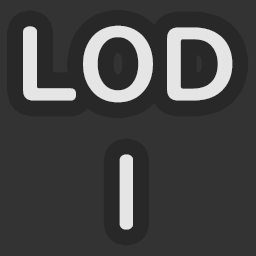
<style>
.page{position:relative;width:256px;height:256px;background:#333333}
.page>*{position:absolute;margin:0}
.t1{font:100px/128px "UDDigiKyokashoNK-B";color:#e5e5e5}
</style>
<div class="page">
<p class="t1" style="left:23px;top:25px;width:210px;height:205px;text-align:center">LOD<br>1</p>
</div>
